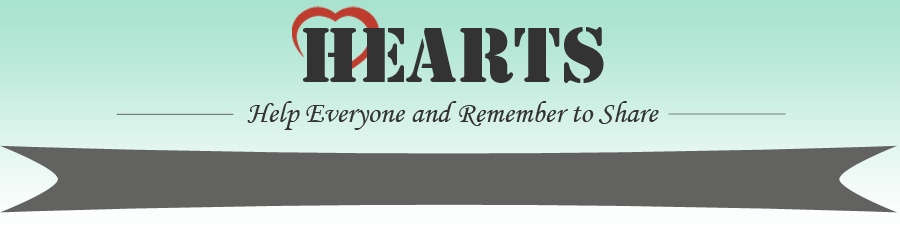
<style>
.page{position:relative;width:900px;height:230px;background:#626261}
.page>*{position:absolute;margin:0}
.t1{font:72px "StencilStd";color:#333333}
.t2{font:30px "MonotypeCorsiva";color:#333333}
</style>
<div class="page">
<p class="t1" style="left:303px;top:27px;width:301px;height:56px">HEARTS</p>
<p class="t2" style="left:247px;top:101px;width:412px;height:29px">Help Everyone and Remember to Share</p>
</div>
